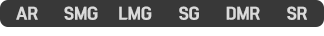
<style>
.page{position:relative;width:324px;height:36px;background:#383838}
.page>*{position:absolute;margin:0}
.t1{font:15px "KoreanBLACK-B";color:#dadada}
</style>
<div class="page">
<p class="t1" style="left:16px;top:6px;width:22px;height:14px">AR</p>
<p class="t1" style="left:64px;top:6px;width:34px;height:14px">SMG</p>
<p class="t1" style="left:119px;top:6px;width:33px;height:14px">LMG</p>
<p class="t1" style="left:179px;top:6px;width:20px;height:14px">SG</p>
<p class="t1" style="left:226px;top:6px;width:34px;height:14px">DMR</p>
<p class="t1" style="left:287px;top:6px;width:20px;height:14px">SR</p>
</div>
